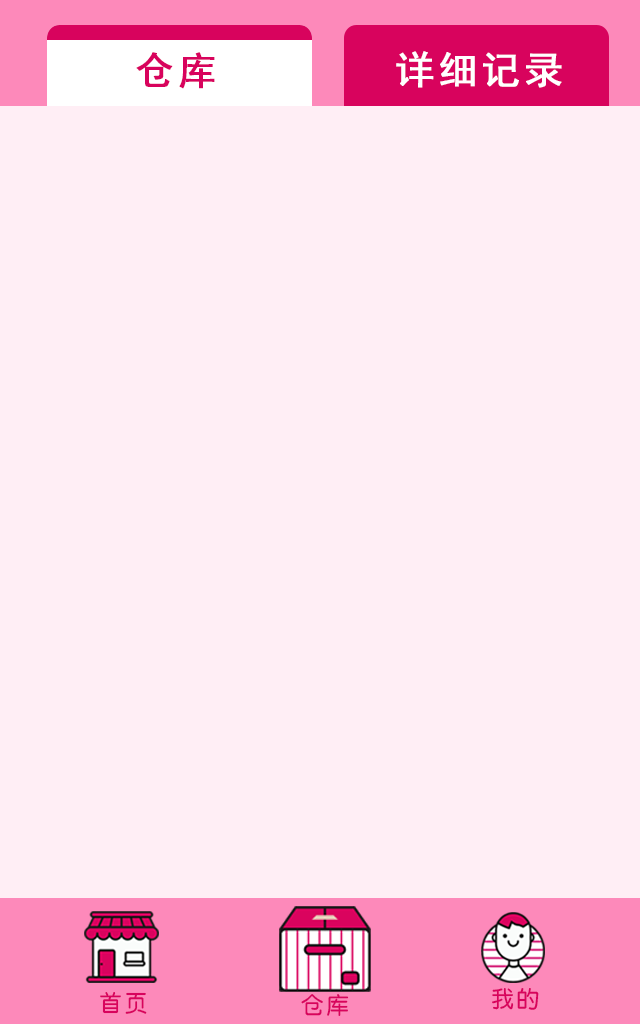
<style>
.page{position:relative;width:640px;height:1024px;background:#ffeef5}
.page>*{position:absolute;margin:0}
.t1{font:38.4px "SimHei";letter-spacing:0.096em;color:#d8035d;font-weight:bold}
.t2{font:38.4px "SimHei";letter-spacing:0.096em;color:#ffffff;font-weight:bold}
.t3{font:23.3px "By-JOSSQ-DMF-in-BeiJing";letter-spacing:0.096em;color:#d8035d}
</style>
<div class="page">
<p class="t1" style="left:136px;top:52px;width:79px;height:37px">仓库</p>
<p class="t2" style="left:396px;top:51px;width:166px;height:37px">详细记录</p>
<p class="t3" style="left:492px;top:988px;width:47px;height:22px">我的</p>
<p class="t3" style="left:100px;top:992px;width:47px;height:22px">首页</p>
<p class="t3" style="left:301px;top:994px;width:48px;height:22px">仓库</p>
</div>
